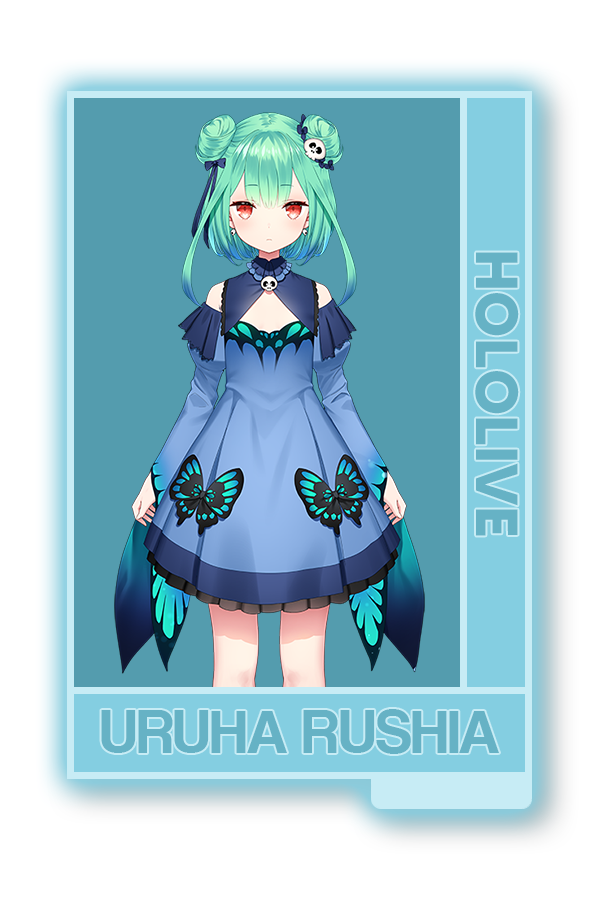
<style>
.page{position:relative;width:600px;height:900px;background:#549cae}
.page>*{position:absolute;margin:0}
.t1{font:59.2px "MADETOMMY-Bold";color:#66b2c5}
.t2{font:62.8px "CoolveticaRg-Regular";color:#66b2c5}
</style>
<div class="page">
<p class="t1" style="left:475px;top:252px;width:44px;height:284px;rotate:90deg">HOLOLIVE</p>
<p class="t2" style="left:101px;top:709px;width:398px;height:45px">URUHA RUSHIA</p>
</div>
